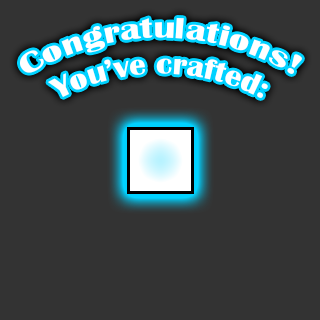
<style>
.page{position:relative;width:320px;height:320px;background:#333333}
.page>*{position:absolute;margin:0}
.t1{font:30px "BritannicBold";color:#ffffff}
</style>
<div class="page">
<p class="t1" style="left:20px;top:18px;width:282px;height:80px;text-align:center">Congratulations!<br>You’ve crafted:</p>
</div>
